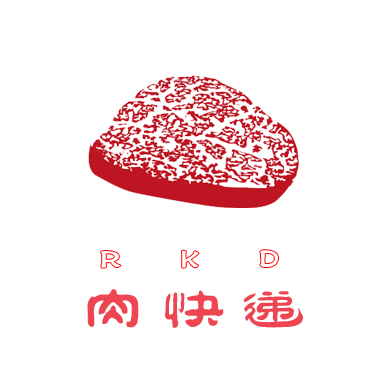
<style>
.page{position:relative;width:388px;height:369px;background:#ffffff}
.page>*{position:absolute;margin:0}
.t1{font:66.4px "Jxiangli";letter-spacing:0.2em;color:#ed4652}
</style>
<div class="page">
<p class="t1" style="left:87px;top:289px;width:216px;height:39px">肉快递</p>
</div>
